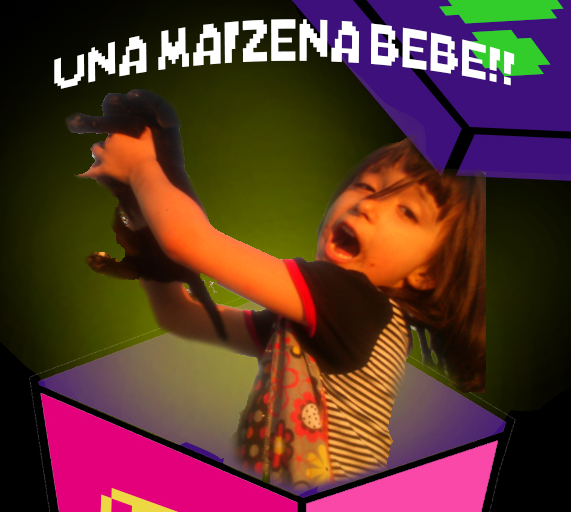
<style>
.page{position:relative;width:571px;height:512px}
.page>*{position:absolute;margin:0}
.t1{font:54px "Mario-Kart-DS";color:#ffffff}
</style>
<div class="page">
<p class="t1" style="left:54px;top:19px;width:461px;height:70px">una maizena bebe!!</p>
</div>
